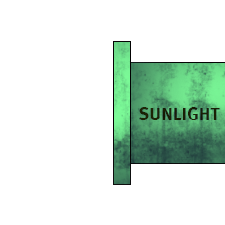
<style>
.page{position:relative;width:225px;height:225px;background:#ffffff}
.page>*{position:absolute;margin:0}
.t1{font:18px "MetaPlusBoldCaps";color:#1a2104}
</style>
<div class="page">
<p class="t1" style="left:139px;top:107px;width:81px;height:13px">SUNLIGHT</p>
</div>
